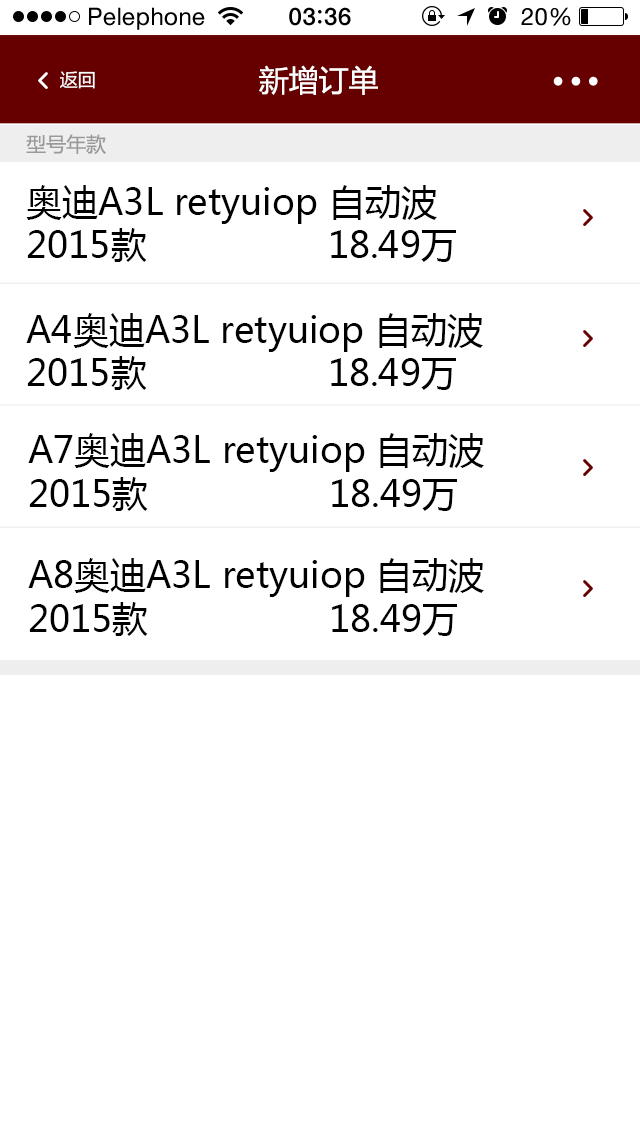
<style>
.page{position:relative;width:640px;height:1138px;background:#ffffff}
.page>*{position:absolute;margin:0}
.t1{font:24px "HelveticaNeue";letter-spacing:0.02em;color:#000000}
.t2{font:24px "HelveticaNeue-Medium";letter-spacing:0.03em;color:#000000}
.t3{font:29.9px "MicrosoftYaHei";color:#ffffff}
.t4{font:18px "MicrosoftYaHei";color:#ffffff}
.t5{font:20px "MicrosoftYaHei";color:#999999}
.t6{font:36px "MicrosoftYaHei";color:#000000}
</style>
<div class="page">
<p class="t1" style="left:89px;top:7px;width:116px;height:23px">Pelephone</p>
<p class="t2" style="left:289px;top:7px;width:62px;height:19px">03 36</p>
<p class="t1" style="left:521px;top:7px;width:50px;height:19px">20%</p>
<p class="t3" style="left:259px;top:65px;width:119px;height:30px">新增订单</p>
<p class="t4" style="left:60px;top:71px;width:35px;height:18px">返回</p>
<p class="t5" style="left:26px;top:134px;width:80px;height:20px">型号年款</p>
<p class="t6" style="left:26px;top:185px;width:430px;height:77px">奥迪A3L retyuiop 自动波<br>2015款                 18.49万</p>
<p class="t6" style="left:26px;top:313px;width:457px;height:77px">A4奥迪A3L retyuiop 自动波<br>2015款                 18.49万</p>
<p class="t6" style="left:28px;top:433px;width:456px;height:78px">A7奥迪A3L retyuiop 自动波<br>2015款                 18.49万</p>
<p class="t6" style="left:28px;top:558px;width:456px;height:78px">A8奥迪A3L retyuiop 自动波<br>2015款                 18.49万</p>
</div>
